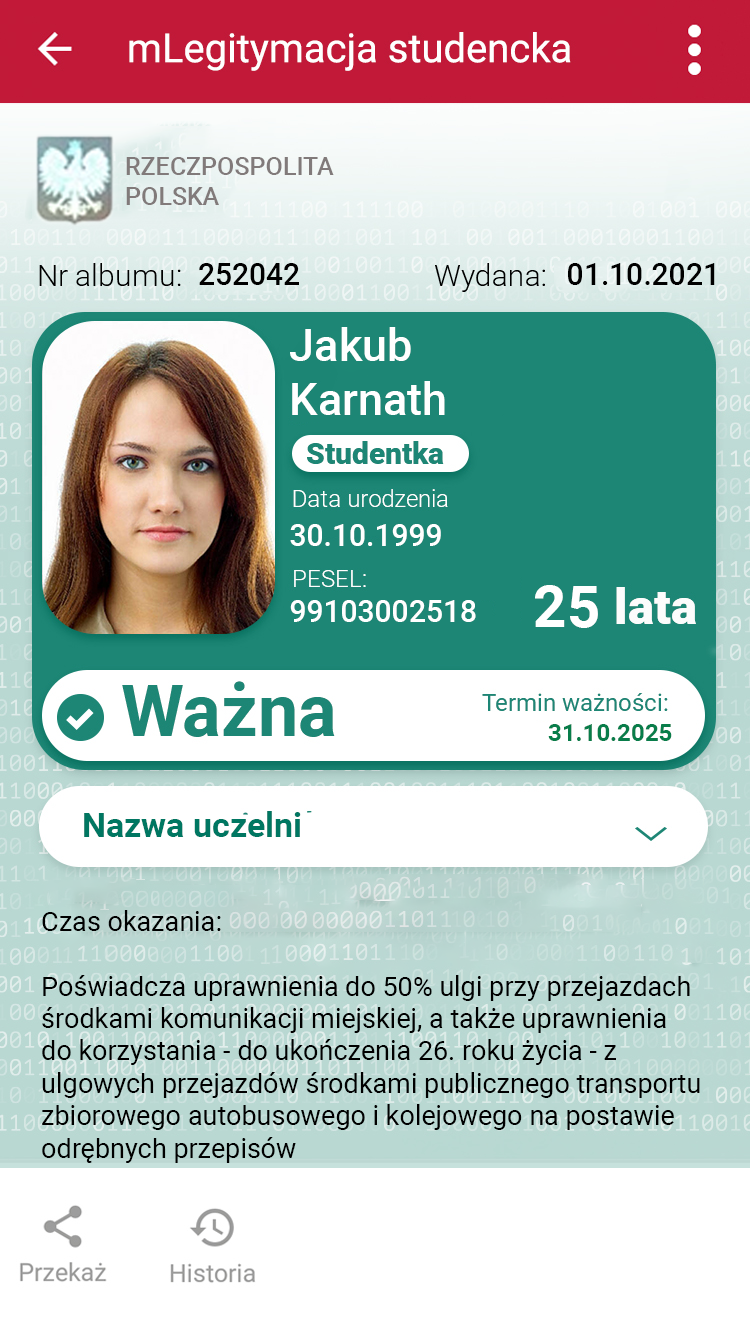
<style>
.page{position:relative;width:750px;height:1334px;background:#ffffff}
.page>*{position:absolute;margin:0}
.t1{font:25px "Roboto-Medium";color:#817a7a}
.t2{font:30px "Roboto-Medium";color:#000000}
.t3{font:45px "Roboto-Medium";color:#ffffff}
.t4{font:30px "Roboto-Medium";color:#ffffff}
.t5{font:58px "Roboto-Bold";color:#ffffff}
.t6{font:24px "Roboto-Bold";color:#087d4a}
.t7{font:34px "Roboto-Bold";color:#007762}
.t8{font:27px "Roboto-Regular";color:#000000}
</style>
<div class="page">
<p class="t1" style="left:126px;top:157px;width:208px;height:48px">RZECZPOSPOLITA <br>POLSKA</p>
<p class="t2" style="left:199px;top:263px;width:100px;height:22px">252042</p>
<p class="t2" style="left:568px;top:263px;width:147px;height:22px">01.10.2021</p>
<p class="t3" style="left:290px;top:327px;width:155px;height:88px">Jakub <br>Karnath</p>
<p class="t4" style="left:290px;top:524px;width:151px;height:22px">30.10.1999</p>
<p class="t5" style="left:535px;top:585px;width:63px;height:43px">25</p>
<p class="t4" style="left:290px;top:600px;width:186px;height:22px">99103002518</p>
<p class="t6" style="left:548px;top:724px;width:124px;height:17px">31.10.2025</p>
<p class="t7" style="left:84px;top:811px;width:217px;height:26px">Nazwa uczelni</p>
<p class="t8" style="left:42px;top:910px;width:658px;height:253px">Czas okazania: <br><br>Poświadcza uprawnienia do 50% ulgi przy przejazdach środkami komunikacji miejskiej, a także uprawnienia do korzystania - do ukończenia 26. roku życia - z ulgowych przejazdów środkami publicznego transportu zbiorowego autobusowego i kolejowego na postawie odrębnych przepisów</p>
</div>
